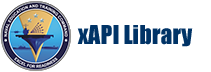
<style>
.page{position:relative;width:211px;height:72px;background:#ffffff}
.page>*{position:absolute;margin:0}
.t1{font:24px "Impact";color:#003366}
</style>
<div class="page">
<p class="t1" style="left:77px;top:25px;width:116px;height:22px">xAPI Library</p>
</div>
